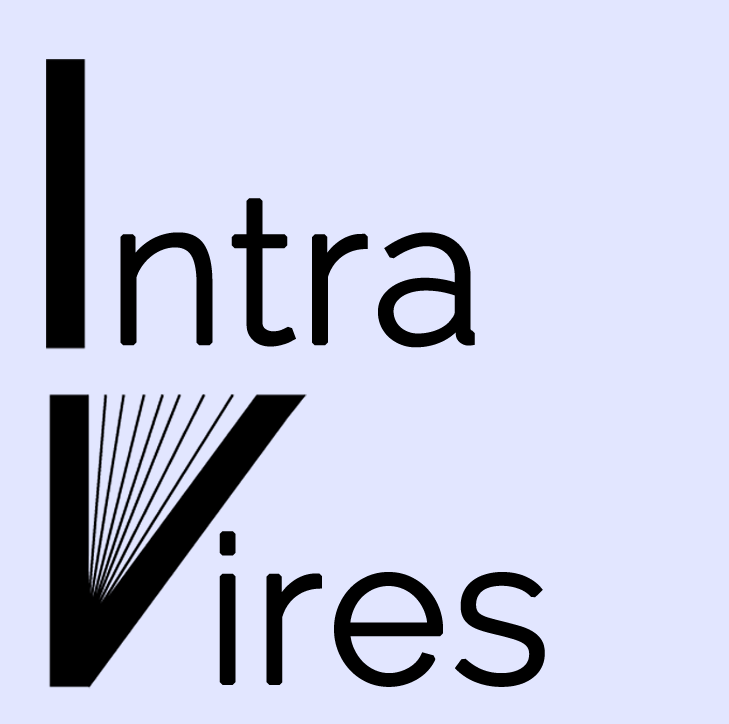
<style>
.page{position:relative;width:729px;height:724px;background:#e2e6ff}
.page>*{position:absolute;margin:0}
.t1{font:202.7px "Raleway-Light";color:#000000;font-weight:bold}
</style>
<div class="page">
<p class="t1" style="left:120px;top:198px;width:355px;height:150px">ntra</p>
<p class="t1" style="left:219px;top:531px;width:326px;height:156px">ires</p>
</div>
